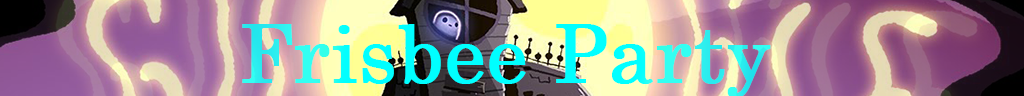
<style>
.page{position:relative;width:1024px;height:96px}
.page>*{position:absolute;margin:0}
.t1{font:80px "CenturySchoolbook";font-weight:bold}
</style>
<div class="page">
<p class="t1" style="left:242px;top:24px;width:529px;height:74px">Frisbee Party</p>
</div>
